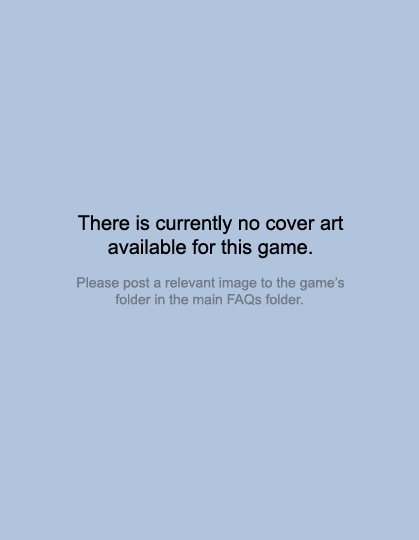
<style>
.page{position:relative;width:419px;height:540px;background:#b0c4de}
.page>*{position:absolute;margin:0}
.t1{font:14px "ArialMT";color:#727983}
.t2{font:20px "ArialMT";color:#000000}
</style>
<div class="page">
<p class="t1" style="left:77px;top:215px;width:268px;height:90px;text-align:center"><span class="t2">There is currently no cover art available for this game. <br><br></span>Please post a relevant image to the game’s folder in the main FAQs folder.</p>
</div>
